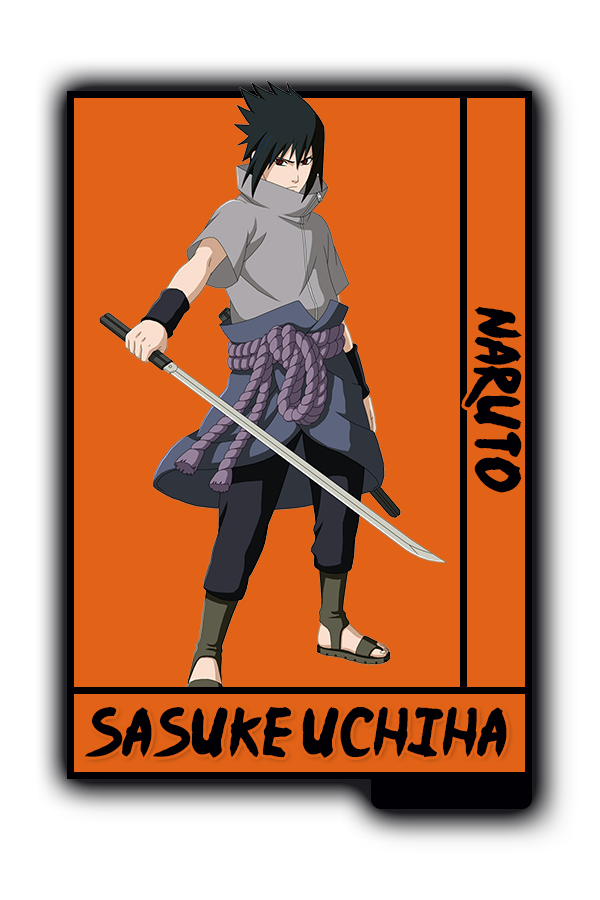
<style>
.page{position:relative;width:600px;height:900px;background:#e26317}
.page>*{position:absolute;margin:0}
.t1{font:52px "Ninja-Naruto";color:#010005}
.t2{font:55.4px "Ninja-Naruto";color:#010005}
</style>
<div class="page">
<p class="t1" style="left:464px;top:307px;width:59px;height:186px;rotate:90deg">Naruto</p>
<p class="t2" style="left:84px;top:706px;width:423px;height:52px">Sasuke Uchiha</p>
</div>
